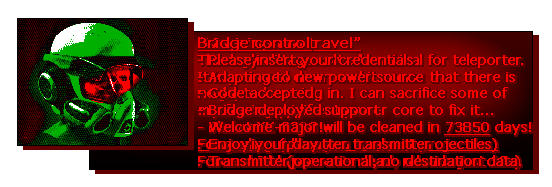
<style>
.page{position:relative;width:552px;height:187px;background:#ffffff}
.page>*{position:absolute;margin:0}
.t1{font:14px "Tahoma";color:#ff0000;font-weight:bold}
.t2{font:14px "Tahoma";color:#ff0000;font-weight:bold;text-decoration:underline;scale:1.15 1}
.t3{font:14px "Tahoma";color:#ff0000;font-weight:bold;text-decoration:underline}
</style>
<div class="page">
<p class="t1" style="left:197px;top:37px;width:326px;height:132px"><span class="t2">“No juice, no travel”<br></span>This looks like a control terminal for teleporter.<br>It is powered down and it seems that there is<br>no juice comming in. I can sacrifice some of<br>my force equipment power core to fix it...<br><br><span class="t3">Force sling (allow you to shoot projectiles)<br></span>Force shield (prevents dead, reloads just 10s)</p>
<p class="t1" style="left:197px;top:37px;width:326px;height:132px"><span class="t2">“No juice, no travel”<br></span>This looks like a control terminal for teleporter.<br>It is powered down and it seems that there is<br>no juice comming in. I can sacrifice some of<br>my force equipment power core to fix it...<br><br><span class="t3">Force sling (allow you to shoot projectiles)<br></span>Force shield (prevents dead, reloads just 10s)</p>
<p class="t1" style="left:198px;top:38px;width:333px;height:131px"><span class="t2">Powering up<br></span>- Energy outage solved<br>- Adapting to new power source<br>- Adapted<br>- Powering up life support<br>- Planet XK-229G will be cleaned in <span class="t3">73850</span> days!<br>- Powering up matter transmitter<br>- Transmitter operational, no destination data.</p>
<p class="t1" style="left:198px;top:37px;width:215px;height:115px"><span class="t2">Bridge control<br></span>- Please insert your credentials<br>  ...<br>- Code accepted<br>- Bridge deployed<br>- Welcome major!<br>- Enjoy your day.</p>
</div>
